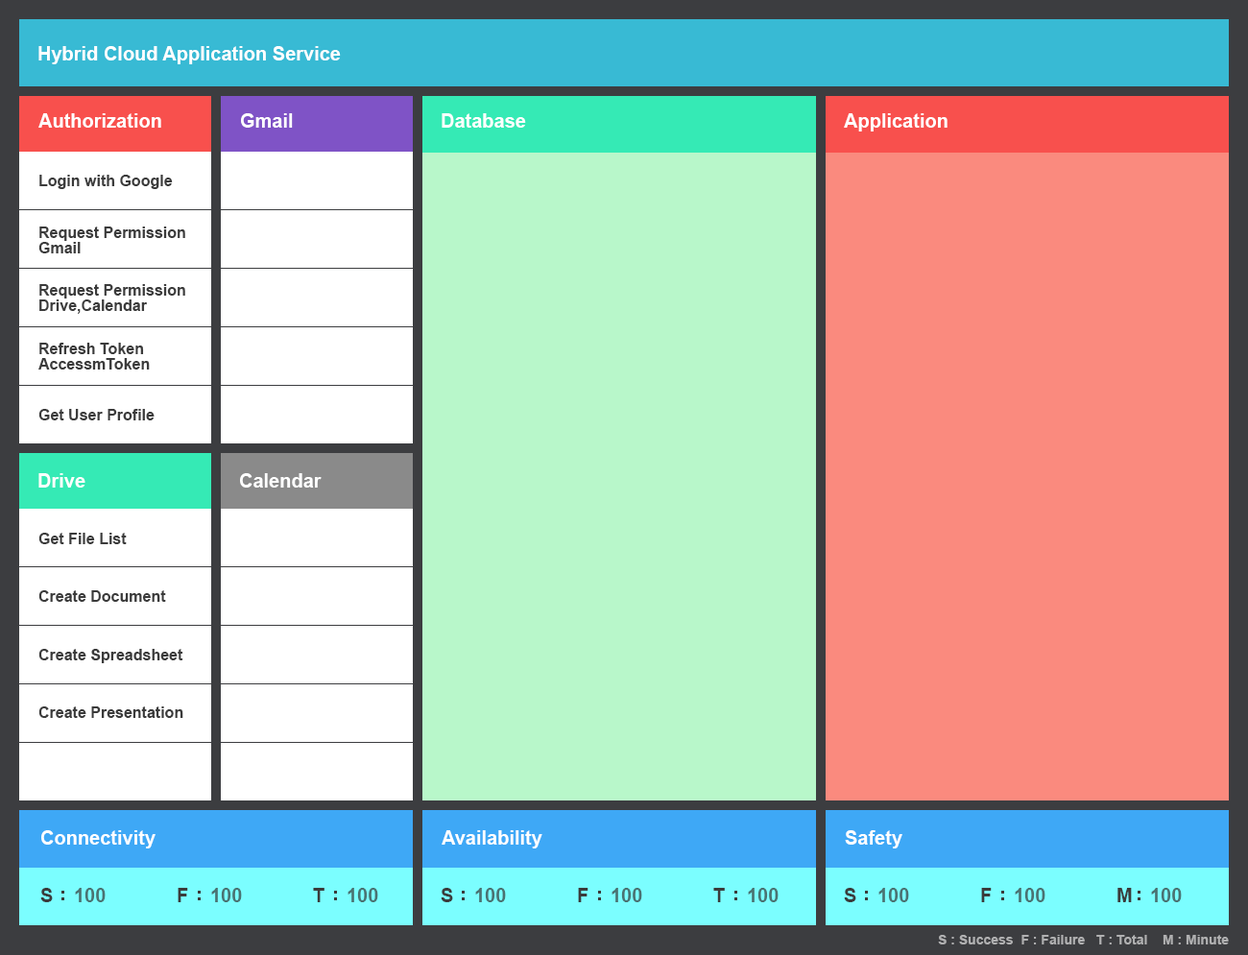
<style>
.page{position:relative;width:1248px;height:955px;background:#fa8a7e}
.page>*{position:absolute;margin:0}
.t1{font:19.2px "Arial-BoldMT";color:#ffffff}
.t2{font:15.4px "Arial-BoldMT";color:#3b3b3b}
.t3{font:15.4px/15.4px "Arial-BoldMT";color:#3b3b3b}
.t4{font:19.2px "Arial-BoldMT";color:#3b3b3b}
.t5{font:19.2px "Arial-BoldMT";color:#4a7272}
.t6{font:13.4px "Arial-BoldMT";color:#b0b0b1}
</style>
<div class="page">
<p class="t1" style="left:38px;top:46px;width:303px;height:18px">Hybrid Cloud Application Service</p>
<p class="t1" style="left:38px;top:113px;width:123px;height:15px">Authorization</p>
<p class="t1" style="left:241px;top:113px;width:52px;height:15px">Gmail</p>
<p class="t1" style="left:442px;top:113px;width:84px;height:15px">Database</p>
<p class="t1" style="left:844px;top:113px;width:104px;height:19px">Application</p>
<p class="t2" style="left:39px;top:175px;width:134px;height:14px">Login with Google</p>
<p class="t3" style="left:38px;top:227px;width:147px;height:26px">Request Permission <br>Gmail</p>
<p class="t3" style="left:39px;top:284px;width:146px;height:30px">Request Permission <br>Drive,Calendar</p>
<p class="t3" style="left:38px;top:343px;width:112px;height:27px">Refresh Token<br>AccessmToken</p>
<p class="t2" style="left:38px;top:409px;width:117px;height:12px">Get User Profile</p>
<p class="t1" style="left:38px;top:473px;width:47px;height:15px">Drive</p>
<p class="t1" style="left:240px;top:473px;width:82px;height:15px">Calendar</p>
<p class="t2" style="left:38px;top:533px;width:89px;height:11px">Get File List</p>
<p class="t2" style="left:38px;top:590px;width:128px;height:12px">Create Document</p>
<p class="t2" style="left:38px;top:649px;width:145px;height:14px">Create Spreadsheet</p>
<p class="t2" style="left:38px;top:707px;width:145px;height:11px">Create Presentation</p>
<p class="t1" style="left:41px;top:831px;width:115px;height:18px">Connectivity</p>
<p class="t1" style="left:442px;top:831px;width:100px;height:18px">Availability</p>
<p class="t1" style="left:845px;top:831px;width:58px;height:18px">Safety</p>
<p class="t4" style="left:40px;top:888px;width:13px;height:15px">S</p>
<p class="t5" style="left:75px;top:888px;width:31px;height:15px">100</p>
<p class="t4" style="left:178px;top:888px;width:10px;height:15px">F</p>
<p class="t5" style="left:211px;top:888px;width:31px;height:15px">100</p>
<p class="t4" style="left:313px;top:888px;width:12px;height:15px">T</p>
<p class="t5" style="left:348px;top:888px;width:30px;height:15px">100</p>
<p class="t4" style="left:441px;top:888px;width:12px;height:15px">S</p>
<p class="t5" style="left:475px;top:888px;width:31px;height:15px">100</p>
<p class="t4" style="left:578px;top:888px;width:11px;height:15px">F</p>
<p class="t5" style="left:612px;top:888px;width:30px;height:15px">100</p>
<p class="t4" style="left:713px;top:888px;width:12px;height:15px">T</p>
<p class="t5" style="left:748px;top:888px;width:31px;height:15px">100</p>
<p class="t4" style="left:844px;top:888px;width:12px;height:15px">S</p>
<p class="t5" style="left:879px;top:888px;width:30px;height:15px">100</p>
<p class="t4" style="left:981px;top:888px;width:11px;height:15px">F</p>
<p class="t5" style="left:1015px;top:888px;width:31px;height:15px">100</p>
<p class="t4" style="left:1118px;top:888px;width:14px;height:15px">M</p>
<p class="t5" style="left:1151px;top:888px;width:31px;height:15px">100</p>
<p class="t6" style="left:938px;top:935px;width:291px;height:10px">S : Success  F : Failure   T : Total    M : Minute</p>
</div>
